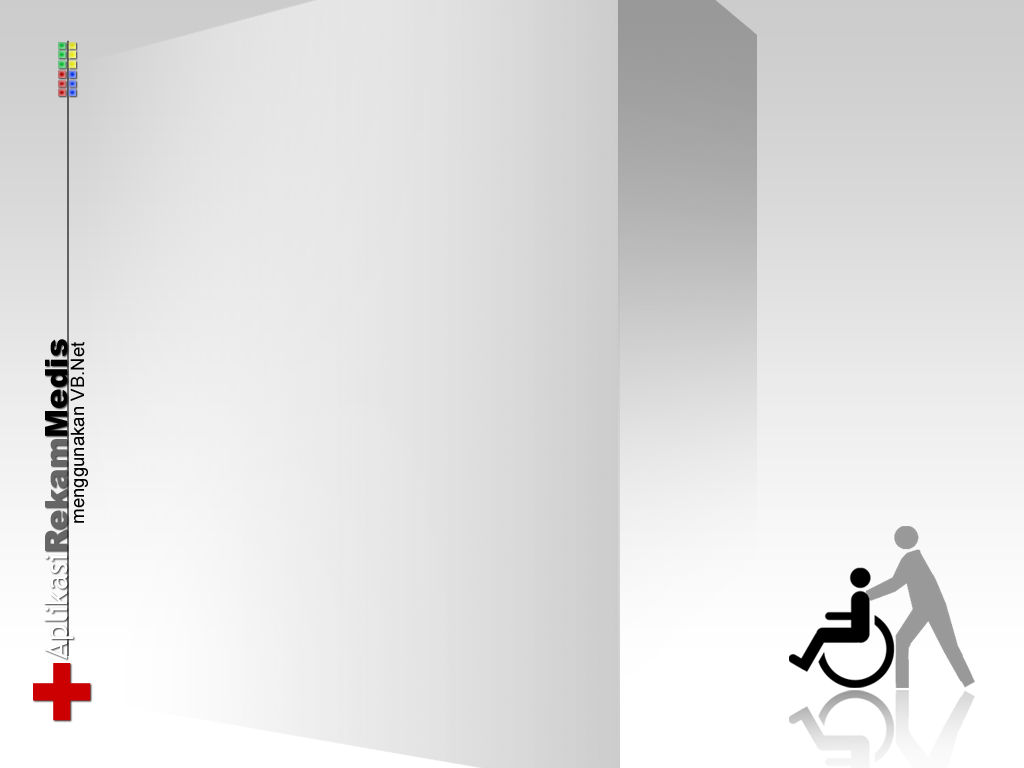
<style>
.page{position:relative;width:1024px;height:768px}
.page>*{position:absolute;margin:0}
.t1{font:30.7px "TrebuchetMS";color:#ffffff}
.t2{font:30.7px "Arial-Black";color:#666666}
.t3{font:30.7px "Arial-Black";color:#000000}
.t4{font:18.6px "ArialMT";color:#000000}
.t5{font:107.6px "Arial-Black";color:#cc0000}
</style>
<div class="page">
<p class="t1" style="left:44px;top:339px;width:30px;height:320px;rotate:-90deg">Aplikasi<span class="t2">Rekam</span><span class="t3">Medis</span></p>
<p class="t4" style="left:70px;top:342px;width:18px;height:181px;rotate:-90deg">menggunakan VB.Net</p>
<p class="t5" style="left:33px;top:663px;width:58px;height:58px;rotate:-90deg">+</p>
</div>
